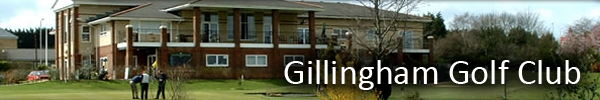
<style>
.page{position:relative;width:600px;height:100px}
.page>*{position:absolute;margin:0}
.t1{font:36px "Calibri";color:#ffffff}
</style>
<div class="page">
<p class="t1" style="left:284px;top:60px;width:297px;height:30px">Gillingham Golf Club</p>
</div>
